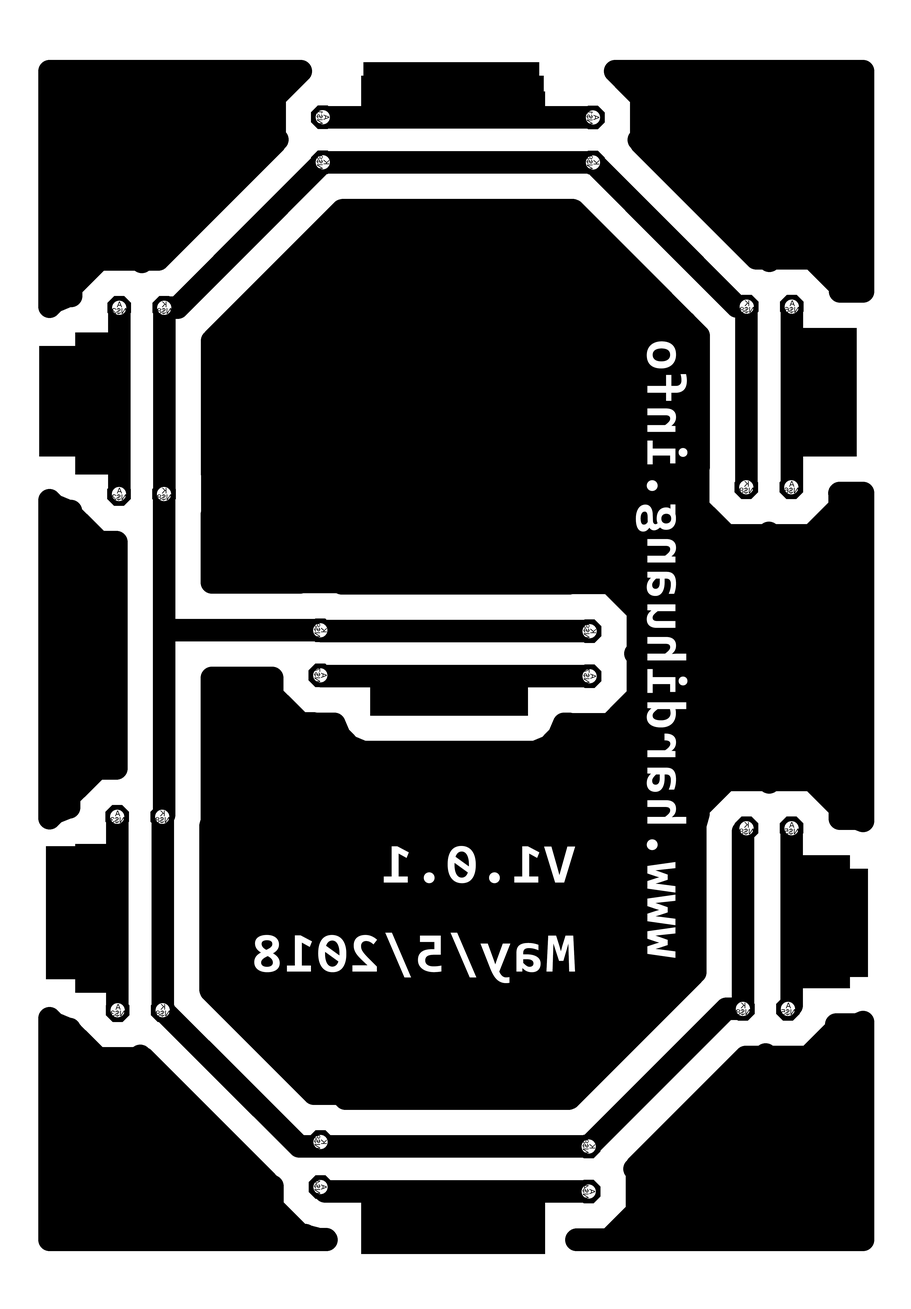
<style>
.page{position:relative;width:911px;height:1309px;background:#000000}
.page>*{position:absolute;margin:0}
.t1{font:56.3px "Consolas-Bold";letter-spacing:0.03em;color:#ffffff}
</style>
<div class="page">
<p class="t1" style="left:636px;top:341px;width:51px;height:617px;rotate:-90deg">www.hardihuang.info</p>
<p class="t1" style="left:384px;top:846px;width:191px;height:37px;rotate:180deg">V1.0.1</p>
<p class="t1" style="left:254px;top:932px;width:321px;height:51px;rotate:180deg">May/5/2018</p>
</div>
